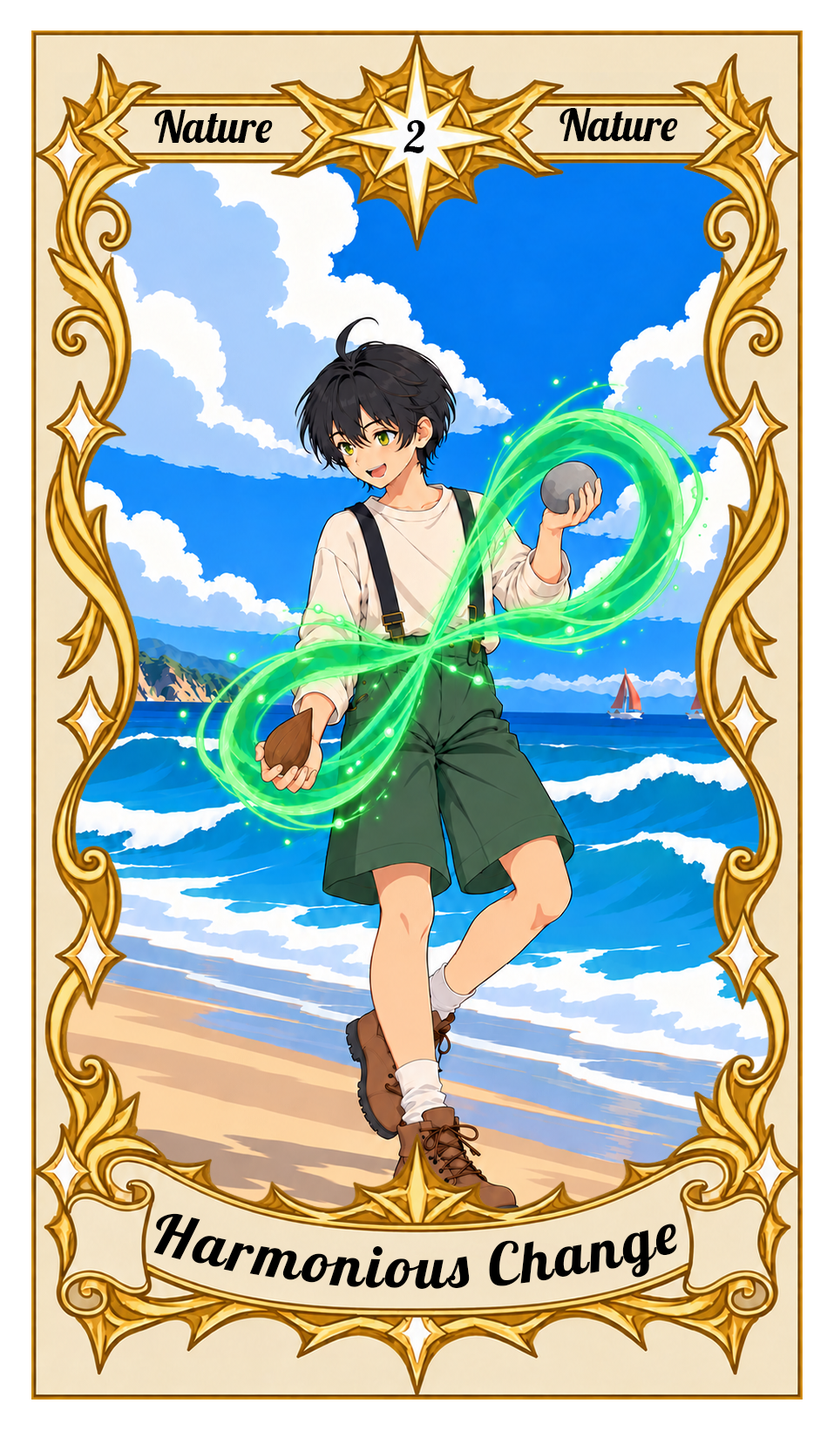
<style>
.page{position:relative;width:834px;height:1430px}
.page>*{position:absolute;margin:0}
.t1{font:43.6px "Lobster-Regular";color:#000000}
.t2{font:58.1px "Lobster-Regular";letter-spacing:0.05em;color:#000000}
</style>
<div class="page">
<p class="t1" style="left:154px;top:110px;width:119px;height:33px">Nature</p>
<p class="t1" style="left:559px;top:108px;width:119px;height:33px">Nature</p>
<p class="t1" style="left:403px;top:120px;width:22px;height:33px">2</p>
<p class="t2" style="left:153px;top:1213px;width:524px;height:76px">Harmonious Change</p>
</div>
